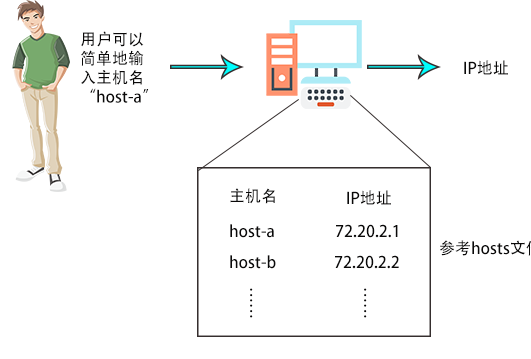
<style>
.page{position:relative;width:531px;height:359px;background:#ffffff}
.page>*{position:absolute;margin:0}
.t1{font:16px "AdobeHeitiStd-Regular";color:#0a0909}
</style>
<div class="page">
<p class="t1" style="left:81px;top:31px;width:68px;height:72px">用户可以<br>简单地输<br>入主机名<br>“host-a”</p>
<p class="t1" style="left:464px;top:60px;width:44px;height:15px">IP地址</p>
<p class="t1" style="left:230px;top:188px;width:45px;height:16px">主机名</p>
<p class="t1" style="left:347px;top:190px;width:44px;height:15px">IP地址</p>
<p class="t1" style="left:230px;top:224px;width:44px;height:14px">host-a</p>
<p class="t1" style="left:336px;top:224px;width:62px;height:14px">72.20.2.1</p>
<p class="t1" style="left:230px;top:255px;width:46px;height:14px">host-b</p>
<p class="t1" style="left:335px;top:255px;width:64px;height:14px">72.20.2.2</p>
<p class="t1" style="left:250px;top:288px;width:3px;height:30px">……</p>
<p class="t1" style="left:364px;top:288px;width:3px;height:30px">……</p>
</div>
